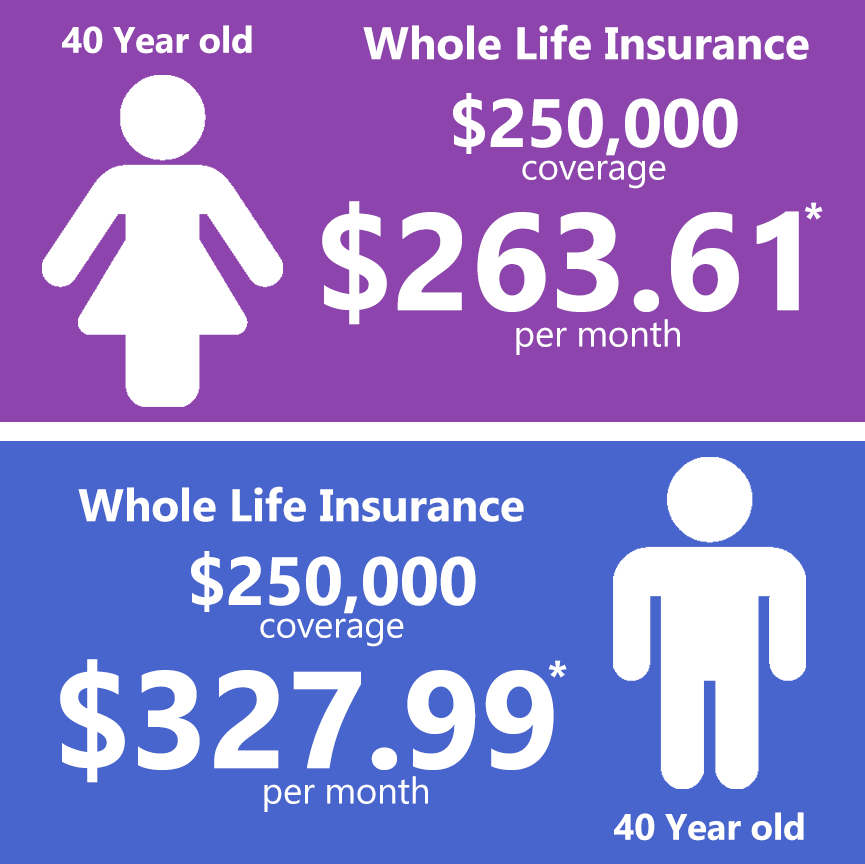
<style>
.page{position:relative;width:865px;height:864px;background:#8e44ad}
.page>*{position:absolute;margin:0}
.t1{font:36.7px "Ebrima-Bold";letter-spacing:-0.005em;color:#ffffff}
.t2{font:45.8px "Ebrima-Bold";letter-spacing:-0.005em;color:#ffffff}
.t3{font:68.2px "Ebrima-Bold";letter-spacing:-0.005em;color:#ffffff}
.t4{font:36.7px "Ebrima";letter-spacing:-0.005em;color:#ffffff}
.t5{font:137.5px "Ebrima-Bold";letter-spacing:-0.005em;color:#ffffff}
</style>
<div class="page">
<p class="t1" style="left:62px;top:25px;width:190px;height:29px">40 Year old</p>
<p class="t2" style="left:363px;top:24px;width:446px;height:36px">Whole Life Insurance</p>
<p class="t3" style="left:453px;top:93px;width:285px;height:63px">$250,000</p>
<p class="t4" style="left:522px;top:160px;width:144px;height:29px">coverage</p>
<p class="t5" style="left:322px;top:201px;width:477px;height:124px">$263.61</p>
<p class="t2" style="left:804px;top:202px;width:19px;height:18px">*</p>
<p class="t4" style="left:516px;top:319px;width:164px;height:36px">per month</p>
<p class="t2" style="left:78px;top:486px;width:446px;height:36px">Whole Life Insurance</p>
<p class="t3" style="left:191px;top:551px;width:285px;height:63px">$250,000</p>
<p class="t4" style="left:260px;top:618px;width:144px;height:29px">coverage</p>
<p class="t5" style="left:60px;top:659px;width:494px;height:124px">$327.99</p>
<p class="t2" style="left:548px;top:660px;width:19px;height:18px">*</p>
<p class="t4" style="left:264px;top:776px;width:164px;height:36px">per month</p>
<p class="t1" style="left:614px;top:812px;width:190px;height:29px">40 Year old</p>
</div>
